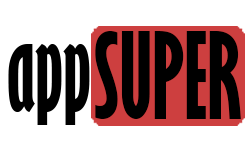
<style>
.page{position:relative;width:250px;height:150px;background:#ffffff}
.page>*{position:absolute;margin:0}
.t1{font:111px "GillSansMT-ExtraCondensedBold";color:#000000;scale:0.94 1}
.t2{font:110.8px "GillSansMT-ExtraCondensedBold";color:#000000;scale:0.93 1}
</style>
<div class="page">
<p class="t1" style="left:95px;top:31px;width:146px;height:88px">SUPER</p>
<p class="t2" style="left:8px;top:44px;width:82px;height:81px">app</p>
</div>
